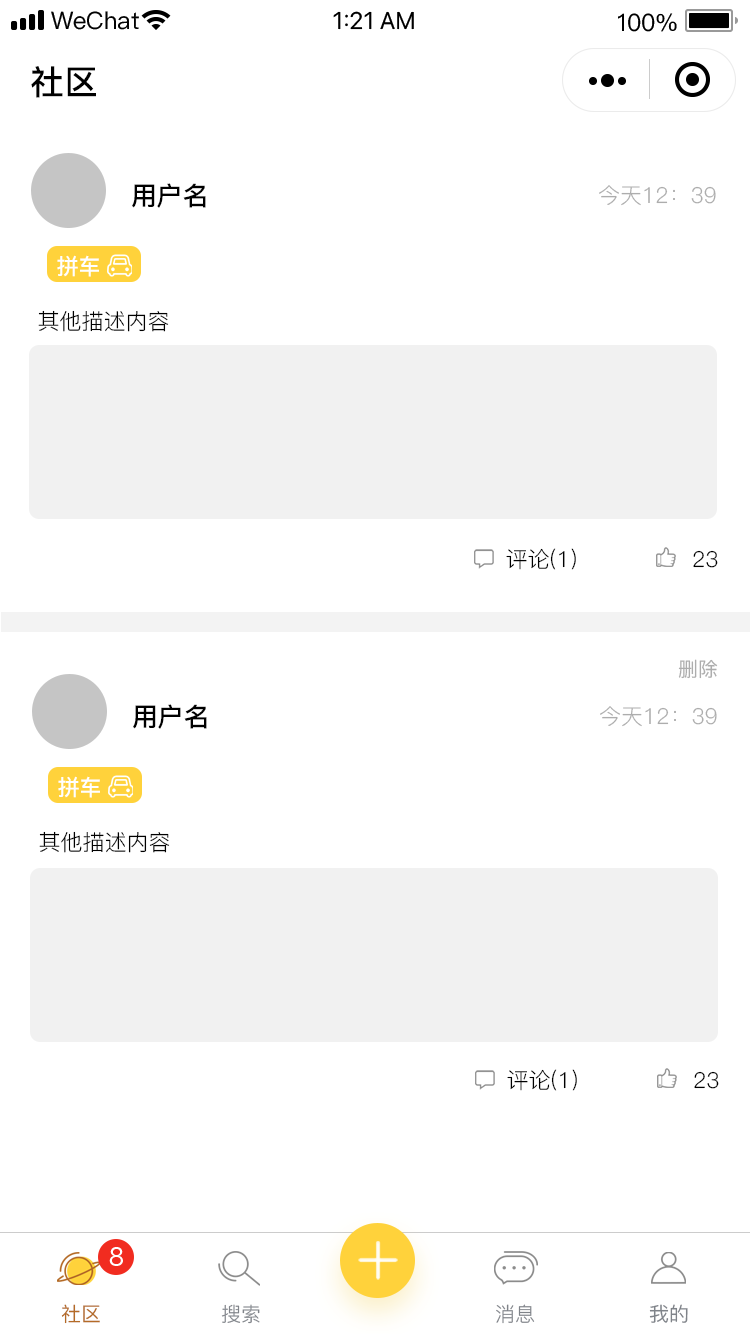
<style>
.page{position:relative;width:750px;height:1334px;background:#ffffff}
.page>*{position:absolute;margin:0}
.t1{font:34px "PingFang-SC-Bold";color:#000000}
.t2{font:26px "PingFang-SC-Bold";color:#000000}
.t3{font:22px "PingFang-SC-Regular";color:#adadad}
.t4{font:22px "PingFang-SC-Bold";color:#ffffff}
.t5{font:22px "PingFang-SC-Regular";color:#000000}
.t6{font:20px "PingFang-SC-Medium";color:#adadad}
.t7{font:20px "PingFang-SC-Medium";color:#b46b27}
.t8{font:20px "PingFangSC-Regular";color:#7f8389}
.t9{font:20px "PingFangSC-Medium";color:#7f8389}
</style>
<div class="page">
<p class="t1" style="left:31px;top:66px;width:65px;height:32px">社区</p>
<p class="t2" style="left:132px;top:183px;width:74px;height:25px">用户名</p>
<p class="t3" style="left:599px;top:185px;width:117px;height:21px">今天12：39</p>
<p class="t4" style="left:57px;top:255px;width:42px;height:22px">拼车</p>
<p class="t5" style="left:38px;top:310px;width:131px;height:22px">其他描述内容</p>
<p class="t5" style="left:506px;top:548px;width:70px;height:22px">评论(1)</p>
<p class="t5" style="left:693px;top:550px;width:25px;height:18px">23</p>
<p class="t6" style="left:678px;top:659px;width:40px;height:20px">删除</p>
<p class="t2" style="left:133px;top:704px;width:74px;height:25px">用户名</p>
<p class="t3" style="left:600px;top:706px;width:117px;height:21px">今天12：39</p>
<p class="t4" style="left:58px;top:776px;width:42px;height:22px">拼车</p>
<p class="t5" style="left:39px;top:831px;width:131px;height:22px">其他描述内容</p>
<p class="t5" style="left:507px;top:1069px;width:70px;height:22px">评论(1)</p>
<p class="t5" style="left:694px;top:1071px;width:25px;height:18px">23</p>
<p class="t7" style="left:61px;top:1304px;width:39px;height:20px">社区</p>
<p class="t8" style="left:221px;top:1304px;width:39px;height:20px">搜索</p>
<p class="t8" style="left:496px;top:1304px;width:39px;height:20px">消息</p>
<p class="t9" style="left:649px;top:1304px;width:39px;height:19px">我的</p>
</div>
